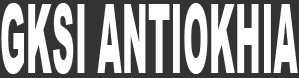
<style>
.page{position:relative;width:299px;height:78px;background:#333333}
.page>*{position:absolute;margin:0}
.t1{font:96.6px "Arial-Black";color:#ffffff;scale:0.32 1}
</style>
<div class="page">
<p class="t1" style="left:1px;top:3px;width:297px;height:71px">GKSI ANTIOKHIA</p>
</div>
